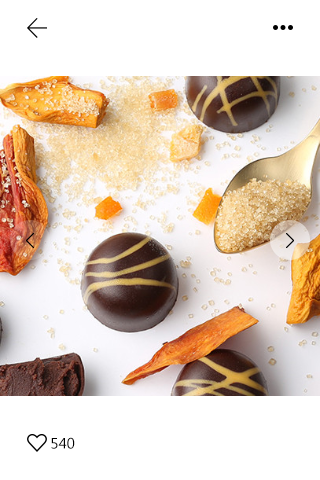
<style>
.page{position:relative;width:320px;height:480px;background:#ffffff}
.page>*{position:absolute;margin:0}
.t1{font:14px "MicrosoftYaHei";color:#000000}
</style>
<div class="page">
<p class="t1" style="left:51px;top:437px;width:24px;height:12px">540</p>
</div>
